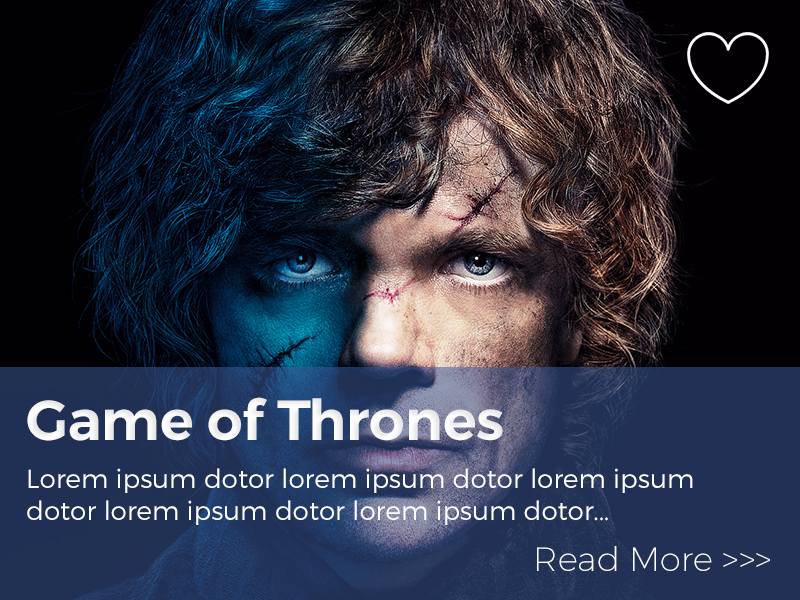
<style>
.page{position:relative;width:800px;height:600px}
.page>*{position:absolute;margin:0}
.t1{font:56.2px "Montserrat-SemiBold";color:#ffffff}
.t2{font:26.2px "Montserrat-Light";color:#ffffff}
.t3{font:33.8px "Montserrat-UltraLight";color:#ffffff}
</style>
<div class="page">
<p class="t1" style="left:27px;top:397px;width:476px;height:44px">Game of Thrones</p>
<p class="t2" style="left:27px;top:468px;width:666px;height:57px">Lorem ipsum dotor lorem ipsum dotor lorem ipsum dotor lorem ipsum dotor lorem ipsum dotor...</p>
<p class="t3" style="left:537px;top:546px;width:233px;height:25px">Read More &gt;&gt;&gt;</p>
</div>
